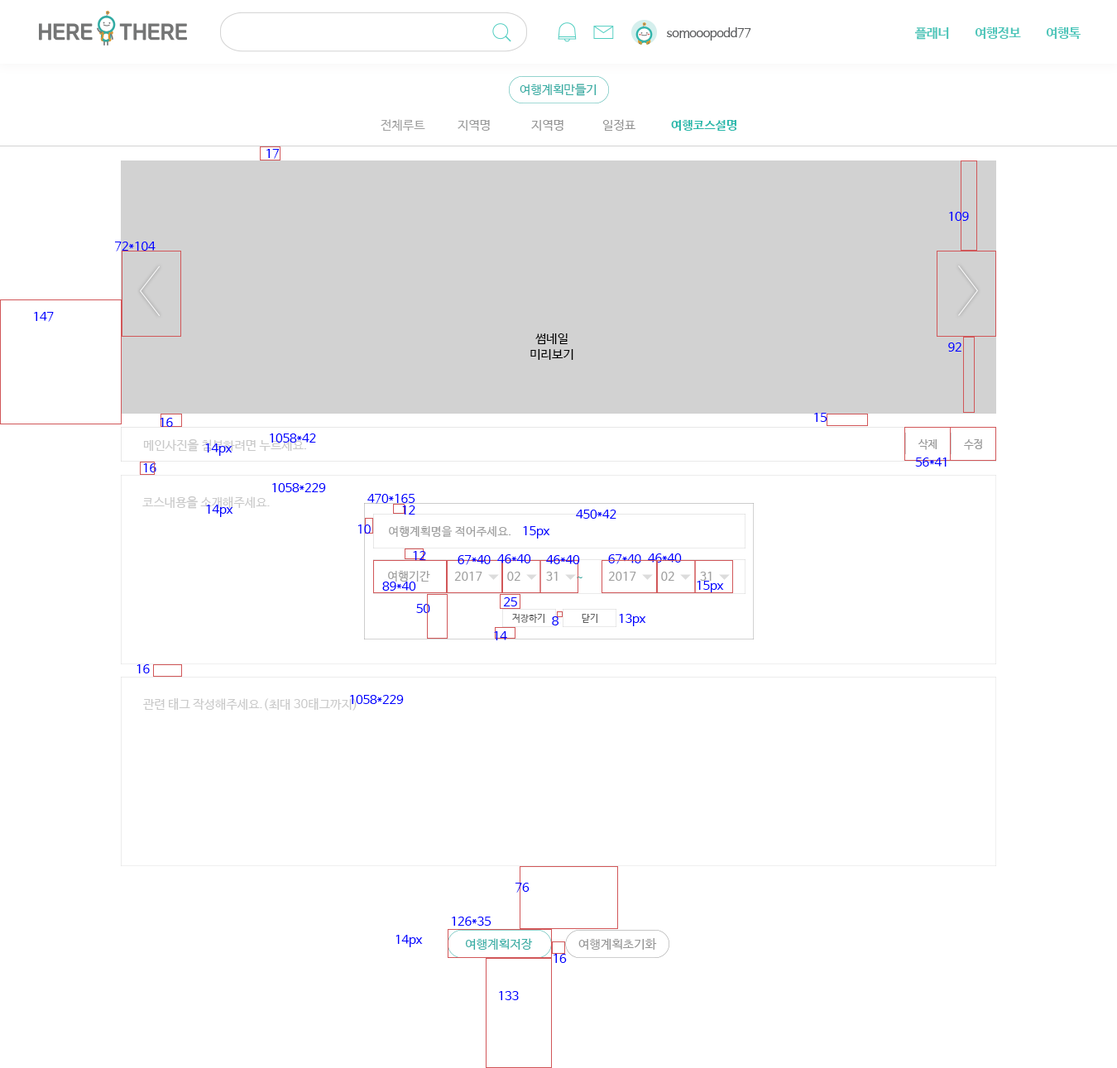
<style>
.page{position:relative;width:1117px;height:1068px;background:#ffffff}
.page>*{position:absolute;margin:0}
.t1{font:12.3px "NanumBarunGothic";letter-spacing:-0.025em;color:#58595b}
.t2{font:13.1px "NanumBarunGothicBold";letter-spacing:-0.025em;color:#4bc5b9}
.t3{font:12.4px "NanumBarunGothic";color:#36ada4}
.t4{font:12.4px "NanumBarunGothic";color:#a0a0a0}
.t5{font:12.4px "NanumBarunGothic";color:#999a9a}
.t6{font:12.4px "NanumBarunGothic";color:#959595}
.t7{font:12.4px "NanumBarunGothicBold";color:#25b7aa}
.t8{font:12px "NanumBarunGothic";color:#0000ff}
.t9{font:12.4px/15.7px "NanumBarunGothic";color:#000000}
.t10{font:12.4px "NanumBarunGothic";color:#c9c9c9}
.t11{font:10.8px "NanumBarunGothic";color:#959595}
.t12{font:11.6px "NanumBarunGothic";letter-spacing:0.025em;color:#a0a0a0}
.t13{font:11.6px "NanumBarunGothic";letter-spacing:0.025em;color:#36ada4}
.t14{font:9.1px "NanumBarunGothic";letter-spacing:0.025em;color:#626262}
</style>
<div class="page">
<p class="t1" style="left:667px;top:27px;width:84px;height:14px">somooopodd77</p>
<p class="t2" style="left:914px;top:27px;width:35px;height:13px">플래너</p>
<p class="t2" style="left:974px;top:27px;width:47px;height:12px">여행정보</p>
<p class="t2" style="left:1046px;top:27px;width:34px;height:12px">여행톡</p>
<p class="t3" style="left:519px;top:84px;width:77px;height:12px">여행계획만들기</p>
<p class="t4" style="left:380px;top:119px;width:45px;height:12px">전체루트</p>
<p class="t5" style="left:457px;top:120px;width:33px;height:11px">지역명</p>
<p class="t6" style="left:531px;top:120px;width:32px;height:11px">지역명</p>
<p class="t6" style="left:602px;top:119px;width:33px;height:12px">일정표</p>
<p class="t7" style="left:671px;top:120px;width:66px;height:11px">여행코스설명</p>
<p class="t8" style="left:266px;top:149px;width:13px;height:10px">17</p>
<p class="t8" style="left:949px;top:212px;width:20px;height:9px">109</p>
<p class="t8" style="left:115px;top:242px;width:41px;height:9px">72*104</p>
<p class="t8" style="left:34px;top:312px;width:20px;height:10px">147</p>
<p class="t9" style="left:530px;top:333px;width:43px;height:27px;text-align:center">썸네일<br>미리보기</p>
<p class="t8" style="left:948px;top:342px;width:13px;height:10px">92</p>
<p class="t8" style="left:814px;top:413px;width:13px;height:9px">15</p>
<p class="t8" style="left:160px;top:418px;width:13px;height:9px">16</p>
<p class="t8" style="left:270px;top:433px;width:46px;height:10px">1058*42</p>
<p class="t10" style="left:143px;top:438px;width:163px;height:14px">메인사진을 첨부하려면 누르세요.</p>
<p class="t8" style="left:205px;top:443px;width:27px;height:13px">14px</p>
<p class="t11" style="left:918px;top:439px;width:18px;height:11px">삭제</p>
<p class="t11" style="left:964px;top:439px;width:18px;height:11px">수정</p>
<p class="t8" style="left:915px;top:457px;width:31px;height:10px">56*41</p>
<p class="t8" style="left:143px;top:463px;width:13px;height:9px">16</p>
<p class="t8" style="left:272px;top:483px;width:54px;height:9px">1058*229</p>
<p class="t10" style="left:142px;top:495px;width:128px;height:14px">코스내용을 소개해주세요.</p>
<p class="t8" style="left:367px;top:494px;width:48px;height:10px">470*165</p>
<p class="t8" style="left:206px;top:505px;width:27px;height:12px">14px</p>
<p class="t8" style="left:402px;top:505px;width:13px;height:9px">12</p>
<p class="t8" style="left:576px;top:510px;width:40px;height:9px">450*42</p>
<p class="t8" style="left:358px;top:524px;width:13px;height:10px">10</p>
<p class="t12" style="left:389px;top:525px;width:122px;height:12px">여행계획명을 적어주세요.</p>
<p class="t8" style="left:523px;top:526px;width:27px;height:12px">15px</p>
<p class="t8" style="left:413px;top:551px;width:13px;height:9px">12</p>
<p class="t8" style="left:457px;top:555px;width:34px;height:10px">67*40</p>
<p class="t8" style="left:497px;top:554px;width:34px;height:9px">46*40</p>
<p class="t8" style="left:546px;top:555px;width:34px;height:9px">46*40</p>
<p class="t8" style="left:608px;top:554px;width:33px;height:10px">67*40</p>
<p class="t8" style="left:648px;top:553px;width:34px;height:9px">46*40</p>
<p class="t8" style="left:382px;top:581px;width:34px;height:10px">89*40</p>
<p class="t12" style="left:388px;top:571px;width:42px;height:10px">여행기간</p>
<p class="t12" style="left:454px;top:572px;width:28px;height:9px">2017</p>
<p class="t12" style="left:507px;top:572px;width:13px;height:9px">02</p>
<p class="t12" style="left:546px;top:572px;width:12px;height:9px">31</p>
<p class="t13" style="left:577px;top:577px;width:5px;height:1px">~</p>
<p class="t12" style="left:608px;top:572px;width:28px;height:9px">2017</p>
<p class="t12" style="left:661px;top:572px;width:13px;height:9px">02</p>
<p class="t8" style="left:696px;top:581px;width:28px;height:12px">15px</p>
<p class="t12" style="left:700px;top:572px;width:11px;height:9px">31</p>
<p class="t8" style="left:416px;top:604px;width:14px;height:9px">50</p>
<p class="t8" style="left:503px;top:597px;width:14px;height:9px">25</p>
<p class="t14" style="left:512px;top:614px;width:32px;height:9px">저장하기</p>
<p class="t8" style="left:552px;top:616px;width:6px;height:9px">8</p>
<p class="t14" style="left:581px;top:614px;width:16px;height:9px">닫기</p>
<p class="t8" style="left:619px;top:614px;width:27px;height:12px">13px</p>
<p class="t8" style="left:494px;top:631px;width:13px;height:9px">14</p>
<p class="t8" style="left:136px;top:664px;width:14px;height:9px">16</p>
<p class="t10" style="left:143px;top:698px;width:214px;height:13px">관련 태그 작성해주세요.(최대 30태그까지)</p>
<p class="t8" style="left:350px;top:695px;width:54px;height:9px">1058*229</p>
<p class="t8" style="left:515px;top:883px;width:14px;height:10px">76</p>
<p class="t8" style="left:452px;top:916px;width:39px;height:10px">126*35</p>
<p class="t8" style="left:395px;top:935px;width:28px;height:12px">14px</p>
<p class="t3" style="left:465px;top:938px;width:68px;height:12px">여행계획저장</p>
<p class="t6" style="left:578px;top:938px;width:79px;height:12px">여행계획초기화</p>
<p class="t8" style="left:553px;top:954px;width:14px;height:9px">16</p>
<p class="t8" style="left:499px;top:991px;width:20px;height:9px">133</p>
</div>
